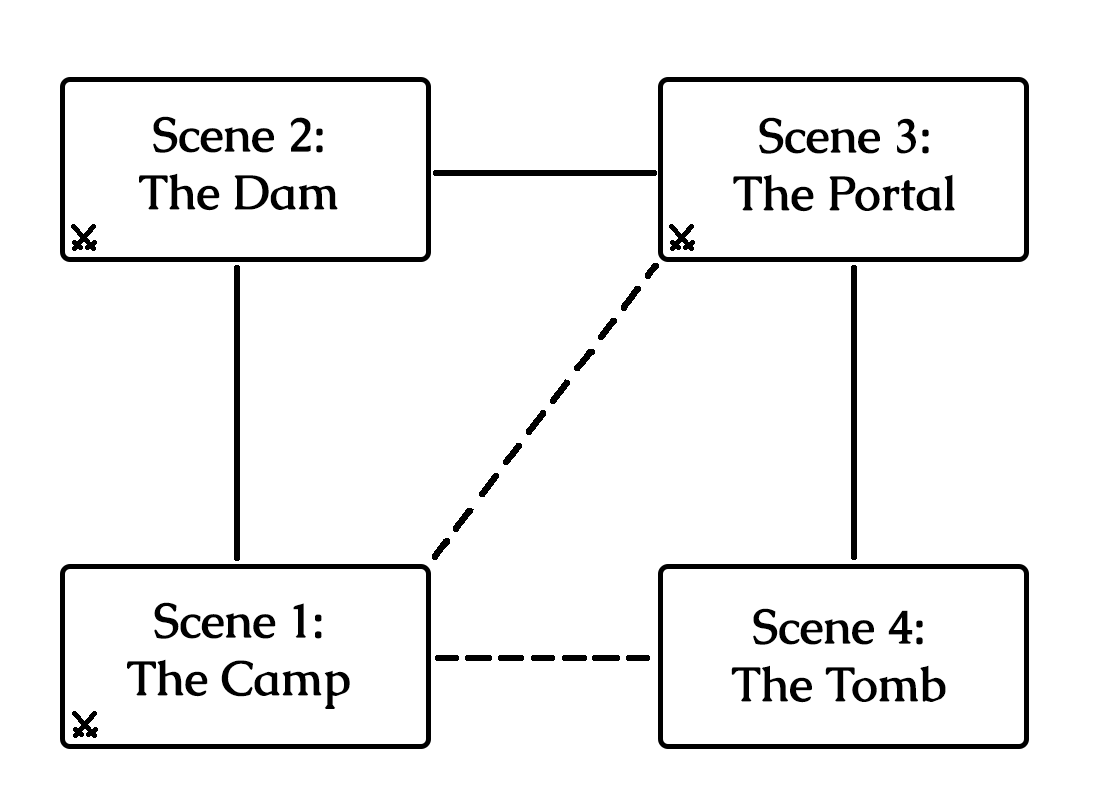
<style>
.page{position:relative;width:1100px;height:800px;background:#ffffff}
.page>*{position:absolute;margin:0}
.t1{font:48px "Caudex-Bold";color:#000000}
</style>
<div class="page">
<p class="t1" style="left:139px;top:116px;width:199px;height:95px;text-align:center">Scene 2:<br>The Dam</p>
<p class="t1" style="left:733px;top:117px;width:222px;height:95px;text-align:center">Scene 3:<br>The Portal</p>
<p class="t1" style="left:127px;top:602px;width:223px;height:107px;text-align:center">Scene 1:<br>The Camp</p>
<p class="t1" style="left:731px;top:608px;width:215px;height:95px;text-align:center">Scene 4:<br>The Tomb</p>
</div>
